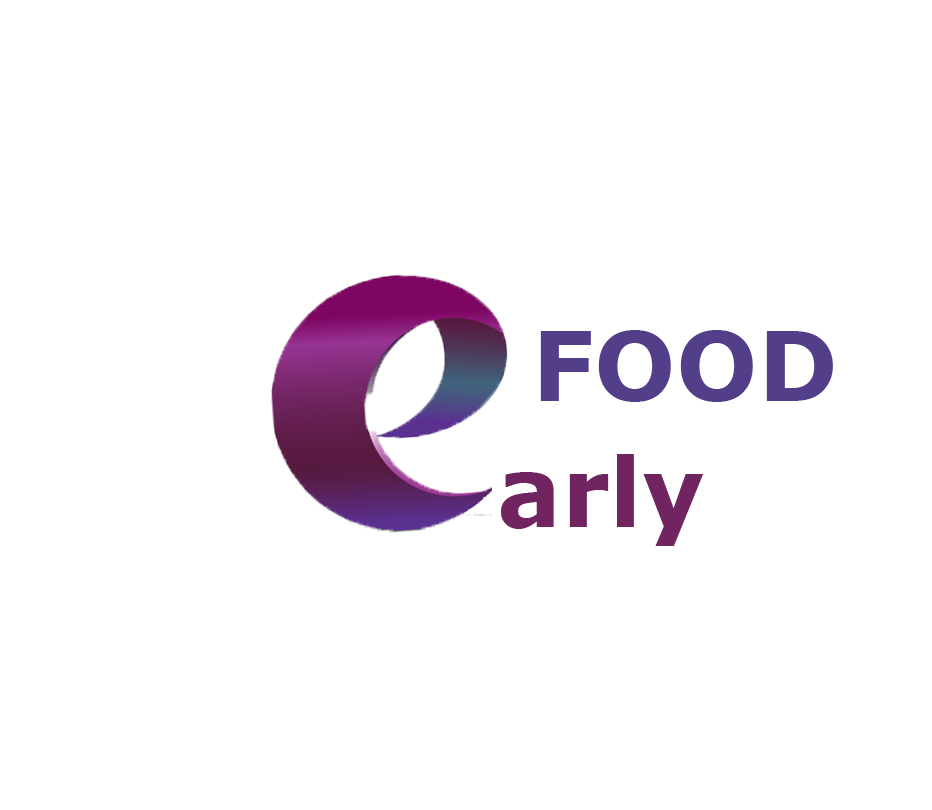
<style>
.page{position:relative;width:932px;height:810px;background:#ffffff}
.page>*{position:absolute;margin:0}
.t1{font:96px "Verdana-Bold";color:#533e8a}
.t2{font:96px "Verdana-Bold";color:#702460}
</style>
<div class="page">
<p class="t1" style="left:540px;top:330px;width:293px;height:72px">FOOD</p>
<p class="t2" style="left:501px;top:454px;width:202px;height:92px">arly</p>
</div>
